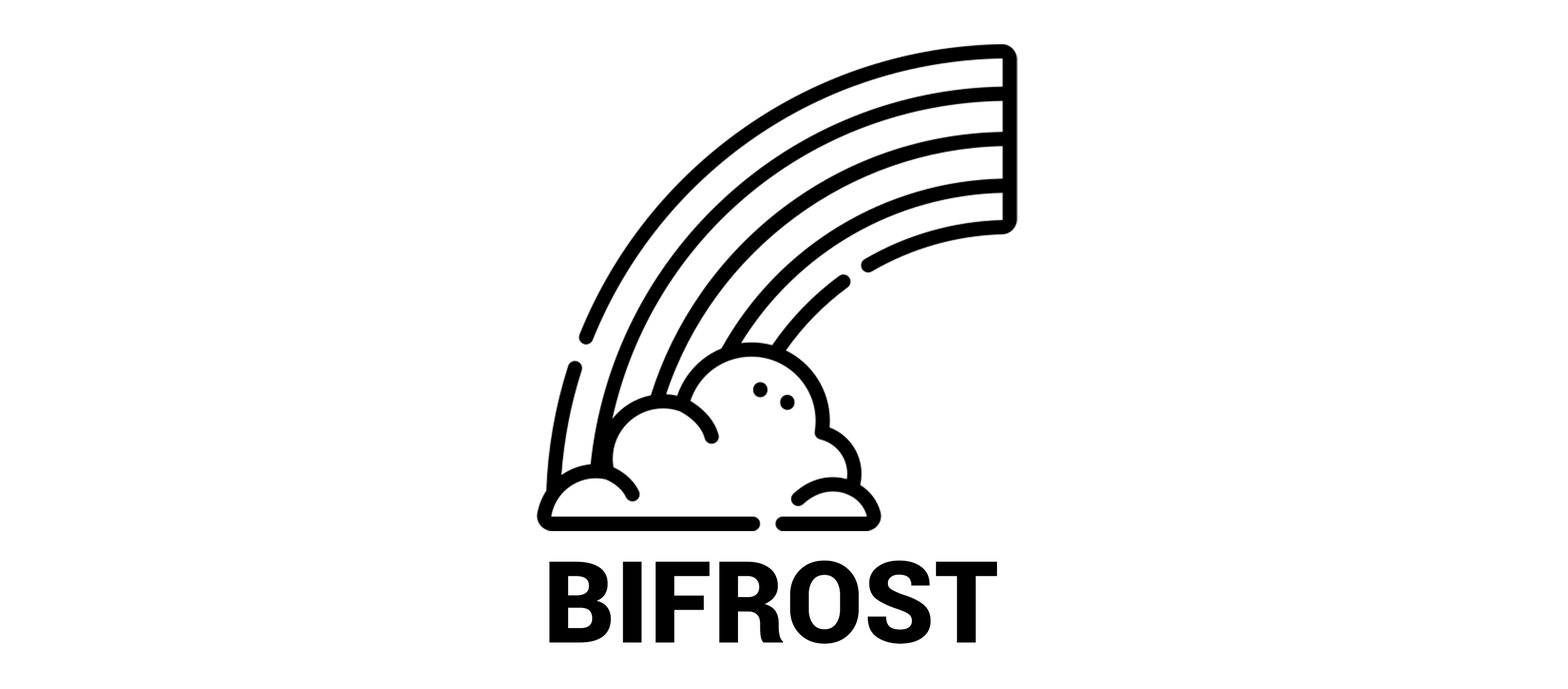
<style>
.page{position:relative;width:1568px;height:689px;background:#ffffff}
.page>*{position:absolute;margin:0}
.t1{font:113.6px "Roboto-Black";color:#000000}
</style>
<div class="page">
<p class="t1" style="left:549px;top:560px;width:449px;height:84px">BIFROST</p>
</div>
